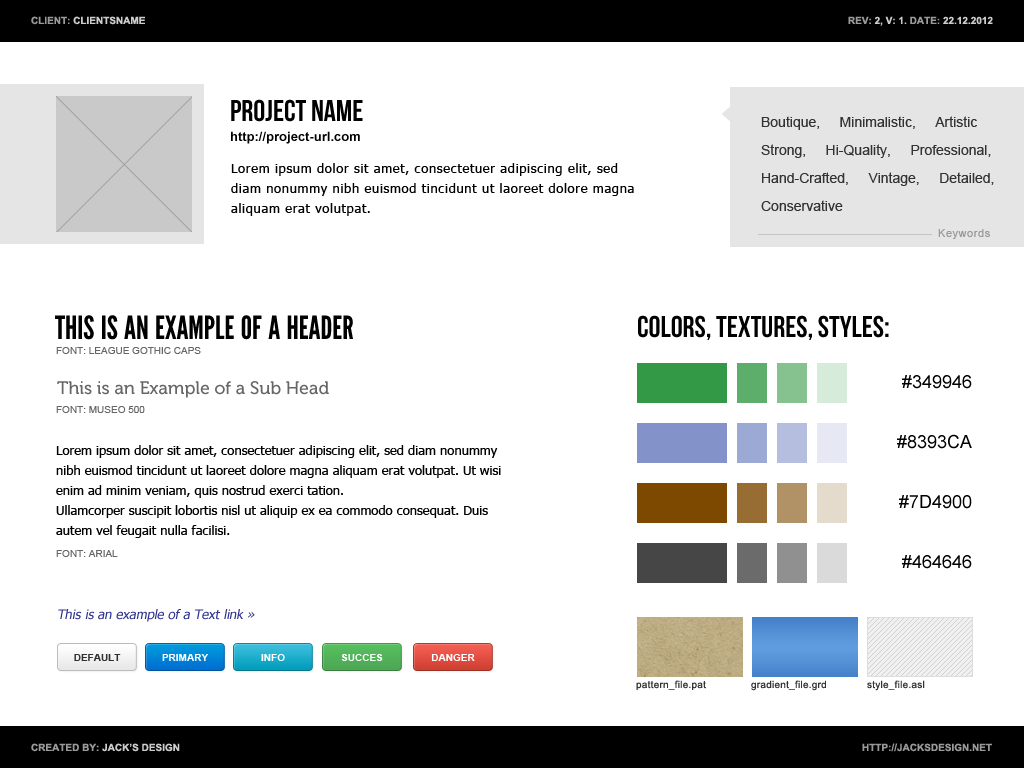
<style>
.page{position:relative;width:1024px;height:768px;background:#ffffff}
.page>*{position:absolute;margin:0}
.t1{font:10px "Arial-BoldMT";color:#cccccc;text-transform:uppercase}
.t2{font:10px "Arial-BoldMT";color:#999999;text-transform:uppercase}
.t3{font:30px "BebasNeue";color:#010101;text-transform:uppercase}
.t4{font:14px/28px "ArialMT";color:#333333}
.t5{font:13px "Arial-BoldMT";color:#010101}
.t6{font:13px/20px "Tahoma";letter-spacing:0.05em;color:#000000}
.t7{font:11px "ArialMT";letter-spacing:0.05em;color:#999999}
.t8{font:32px "LeagueGothic";color:#000000;text-transform:uppercase}
.t9{font:10px "ArialMT";color:#666666;text-transform:uppercase}
.t10{font:18px "ArialMT";color:#000000;text-transform:uppercase}
.t11{font:18px "Museo-500";letter-spacing:-0.01em;color:#666666}
.t12{font:13px/20px "Tahoma";color:#000000}
.t13{font:13px "Tahoma";color:#2f358f;font-style:italic}
.t14{font:10px "Arial-BoldMT";color:#313131;text-transform:uppercase}
.t15{font:10px "Arial-BoldMT";color:#ffffff;text-transform:uppercase}
.t16{font:10px "ArialMT";letter-spacing:0.025em;color:#333333}
</style>
<div class="page">
<p class="t1" style="left:31px;top:16px;width:114px;height:9px"><span class="t2">client: </span>Clientsname</p>
<p class="t1" style="left:848px;top:16px;width:145px;height:10px"><span class="t2">rev: </span>2, v: 1. <span class="t2">date: </span>22.12.2012</p>
<p class="t3" style="left:231px;top:99px;width:132px;height:23px">Project Name</p>
<p class="t4" style="left:761px;top:116px;width:233px;height:95px">Boutique,     Minimalistic,     Artistic<br>Strong,     Hi-Quality,     Professional,     Hand-Crafted,     Vintage,     Detailed,     Conservative</p>
<p class="t5" style="left:231px;top:131px;width:129px;height:13px">http://project-url.com</p>
<p class="t6" style="left:231px;top:163px;width:403px;height:53px">Lorem ipsum dolor sit amet, consectetuer adipiscing elit, sed diam nonummy nibh euismod tincidunt ut laoreet dolore magna aliquam erat volutpat.</p>
<p class="t7" style="left:938px;top:229px;width:52px;height:10px">Keywords</p>
<p class="t8" style="left:55px;top:315px;width:298px;height:25px">This is an Example of a Header</p>
<p class="t3" style="left:638px;top:315px;width:251px;height:25px">colors, Textures, styles:</p>
<p class="t9" style="left:56px;top:347px;width:145px;height:7px">Font: League gothic caps</p>
<p class="t10" style="left:902px;top:375px;width:70px;height:14px">#349946</p>
<p class="t11" style="left:57px;top:381px;width:272px;height:17px">This is an Example of a Sub Head</p>
<p class="t9" style="left:56px;top:406px;width:89px;height:7px">Font: Museo 500</p>
<p class="t10" style="left:897px;top:434px;width:75px;height:15px">#8393ca</p>
<p class="t12" style="left:56px;top:445px;width:445px;height:93px">Lorem ipsum dolor sit amet, consectetuer adipiscing elit, sed diam nonummy nibh euismod tincidunt ut laoreet dolore magna aliquam erat volutpat. Ut wisi enim ad minim veniam, quis nostrud exerci tation.<br>Ullamcorper suscipit lobortis nisl ut aliquip ex ea commodo consequat. Duis autem vel feugait nulla facilisi.</p>
<p class="t10" style="left:899px;top:495px;width:73px;height:14px">#7d4900</p>
<p class="t9" style="left:56px;top:550px;width:62px;height:7px">Font: Arial</p>
<p class="t10" style="left:902px;top:555px;width:70px;height:14px">#464646</p>
<p class="t13" style="left:58px;top:609px;width:197px;height:13px">This is an example of a Text link »</p>
<p class="t14" style="left:74px;top:654px;width:47px;height:7px">Default</p>
<p class="t15" style="left:162px;top:654px;width:46px;height:7px">Primary</p>
<p class="t15" style="left:261px;top:654px;width:24px;height:7px">Info</p>
<p class="t15" style="left:341px;top:654px;width:42px;height:7px">Succes</p>
<p class="t15" style="left:431px;top:654px;width:44px;height:7px">Danger</p>
<p class="t16" style="left:636px;top:680px;width:70px;height:10px">pattern_file.pat</p>
<p class="t16" style="left:751px;top:680px;width:75px;height:11px">gradient_file.grd</p>
<p class="t16" style="left:867px;top:680px;width:58px;height:11px">style_file.asl</p>
<p class="t1" style="left:31px;top:743px;width:149px;height:9px"><span class="t2">created by: </span>jack’s design</p>
<p class="t2" style="left:862px;top:743px;width:130px;height:9px">http://jacksdesign.net</p>
</div>
